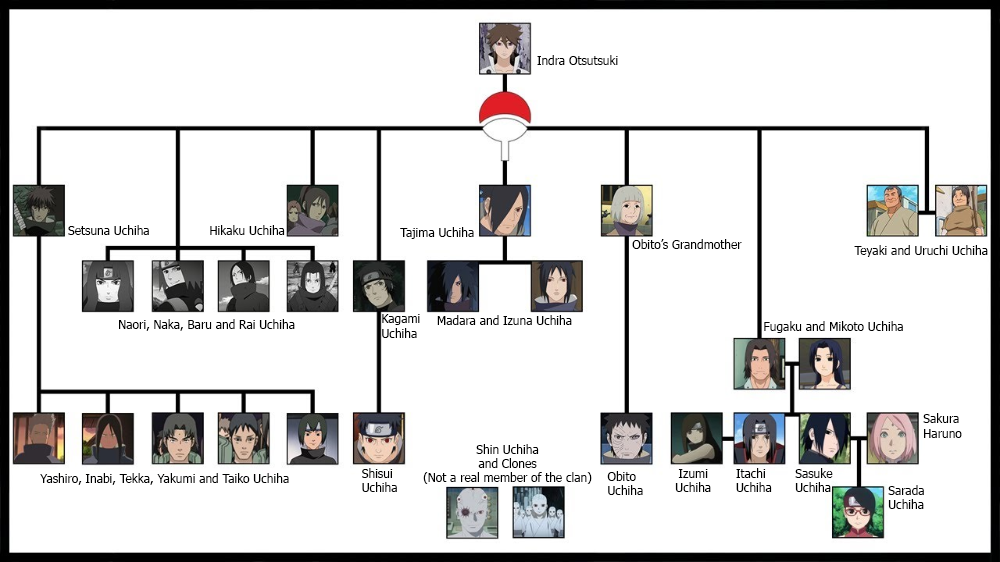
<style>
.page{position:relative;width:1000px;height:562px;background:#ffffff}
.page>*{position:absolute;margin:0}
.t1{font:12px "Tahoma";color:#000000}
</style>
<div class="page">
<p class="t1" style="left:537px;top:55px;width:81px;height:10px">Indra Otsutsuki</p>
<p class="t1" style="left:68px;top:225px;width:81px;height:10px">Setsuna Uchiha</p>
<p class="t1" style="left:210px;top:225px;width:75px;height:10px">Hikaku Uchiha</p>
<p class="t1" style="left:400px;top:227px;width:74px;height:12px">Tajima Uchiha</p>
<p class="t1" style="left:632px;top:239px;width:110px;height:10px">Obito’s Grandmother</p>
<p class="t1" style="left:854px;top:245px;width:134px;height:12px">Teyaki and Uruchi Uchiha</p>
<p class="t1" style="left:382px;top:314px;width:38px;height:24px">Kagami<br>Uchiha</p>
<p class="t1" style="left:437px;top:315px;width:135px;height:10px">Madara and Izuna Uchiha</p>
<p class="t1" style="left:119px;top:319px;width:176px;height:12px">Naori, Naka, Baru and Rai Uchiha</p>
<p class="t1" style="left:764px;top:321px;width:139px;height:12px">Fugaku and Mikoto Uchiha</p>
<p class="t1" style="left:923px;top:413px;width:39px;height:25px">Sakura<br>Haruno</p>
<p class="t1" style="left:423px;top:444px;width:169px;height:40px;text-align:center">Shin Uchiha<br>and Clones<br>(Not a real member of the clan)</p>
<p class="t1" style="left:40px;top:473px;width:249px;height:12px">Yashiro, Inabi, Tekka, Yakumi and Taiko Uchiha</p>
<p class="t1" style="left:362px;top:468px;width:35px;height:24px">Shisui<br>Uchiha</p>
<p class="t1" style="left:607px;top:471px;width:36px;height:24px">Obito<br>Uchiha</p>
<p class="t1" style="left:675px;top:469px;width:36px;height:23px;text-align:center">Izumi<br>Uchiha</p>
<p class="t1" style="left:736px;top:468px;width:36px;height:24px">Itachi<br>Uchiha</p>
<p class="t1" style="left:795px;top:468px;width:38px;height:24px">Sasuke<br>Uchiha</p>
<p class="t1" style="left:888px;top:485px;width:36px;height:24px">Sarada<br>Uchiha</p>
</div>
